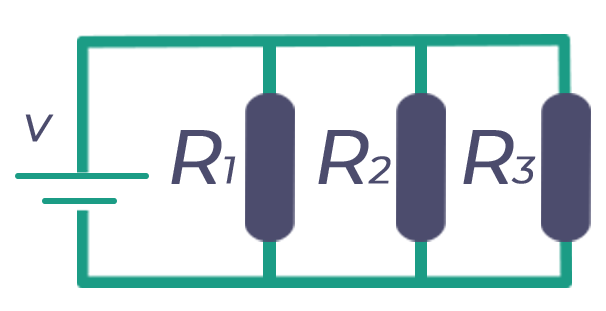
<style>
.page{position:relative;width:606px;height:311px;background:#ffffff}
.page>*{position:absolute;margin:0}
.t1{font:37.8px "Montserrat-Regular";letter-spacing:0.005em;color:#4c4c6d;font-weight:bold;font-style:italic}
.t2{font:75.6px "Montserrat-Regular";letter-spacing:0.005em;color:#4c4c6d;font-weight:bold;font-style:italic}
</style>
<div class="page">
<p class="t1" style="left:25px;top:114px;width:29px;height:28px">V</p>
<p class="t2" style="left:171px;top:130px;width:65px;height:54px">R<span class="t1">1</span></p>
<p class="t2" style="left:318px;top:130px;width:73px;height:54px">R<span class="t1">2</span></p>
<p class="t2" style="left:463px;top:130px;width:73px;height:54px">R<span class="t1">3</span></p>
</div>
